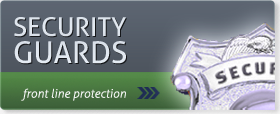
<style>
.page{position:relative;width:280px;height:114px}
.page>*{position:absolute;margin:0}
.t1{font:26px/9px "Aller";color:#e0e7ee}
.t2{font:30px/9px "Aller";color:#e0e7ee}
.t3{font:12px "Aller-LightItalic";color:#f3f4f3}
</style>
<div class="page">
<p class="t1" style="left:14px;top:17px;width:112px;height:47px">SECURITY<br><br><br><span class="t2">GUARDS</span></p>
<p class="t3" style="left:21px;top:88px;width:105px;height:13px">front line protection</p>
</div>
